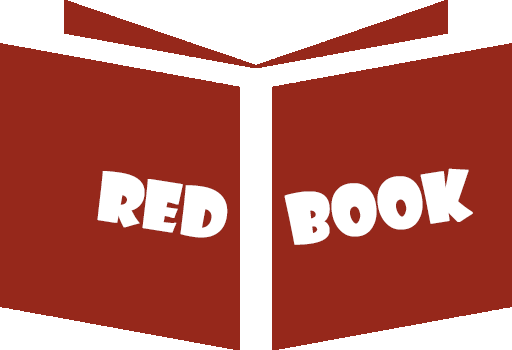
<style>
.page{position:relative;width:512px;height:350px;background:#96281b}
.page>*{position:absolute;margin:0}
.t1{font:65px "ShowcardGothic-Reg";color:#ffffff;font-weight:bold}
</style>
<div class="page">
<p class="t1" style="left:97px;top:171px;width:131px;height:67px;rotate:9deg">RED</p>
<p class="t1" style="left:284px;top:168px;width:189px;height:77px;rotate:-9deg">Book</p>
</div>
